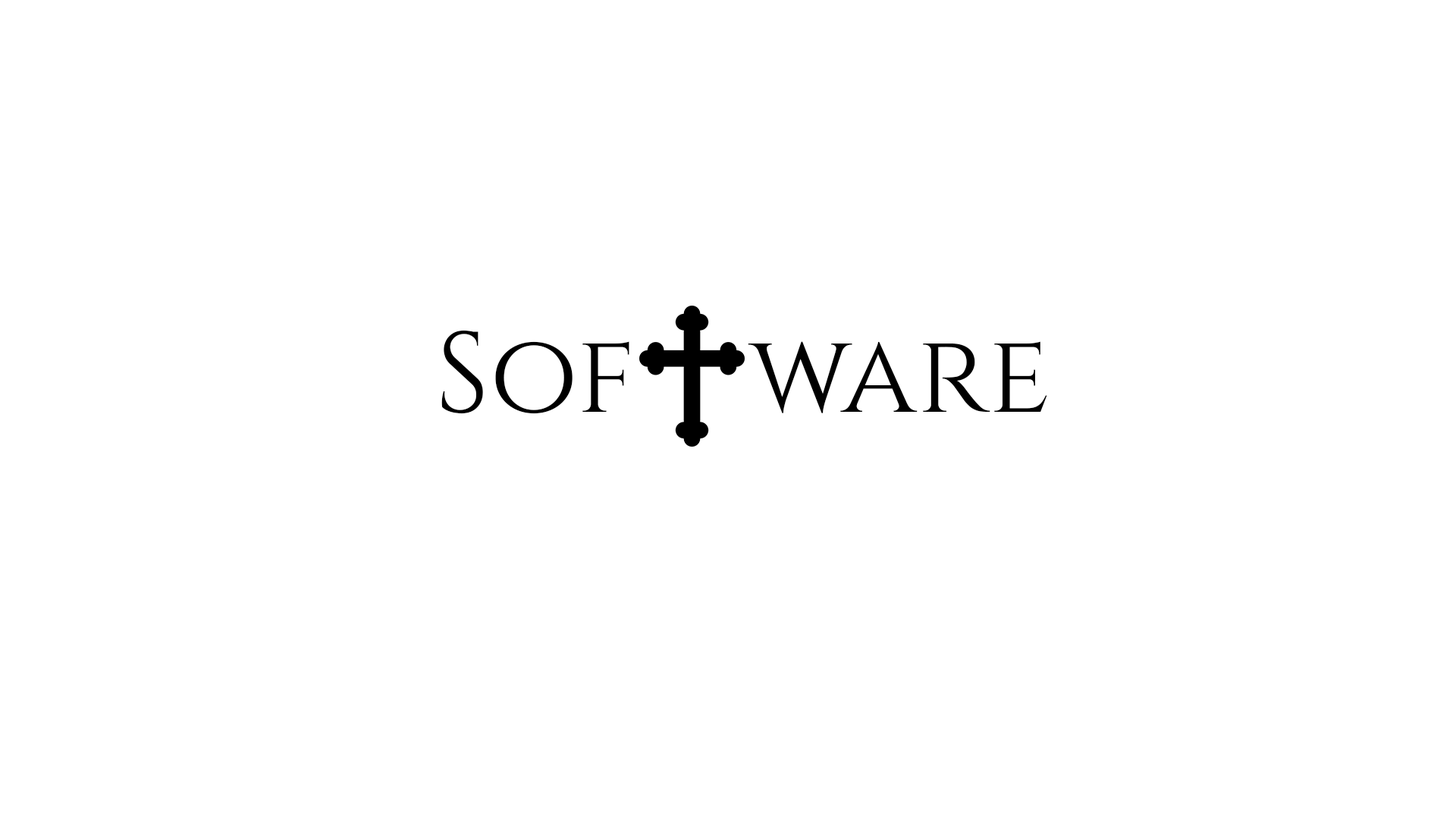
<style>
.page{position:relative;width:1456px;height:819px;background:#ffffff}
.page>*{position:absolute;margin:0}
.t1{font:113.7px "Cinzel-Regular";color:#000000}
</style>
<div class="page">
<p class="t1" style="left:441px;top:330px;width:606px;height:84px">Sof    ware</p>
</div>
